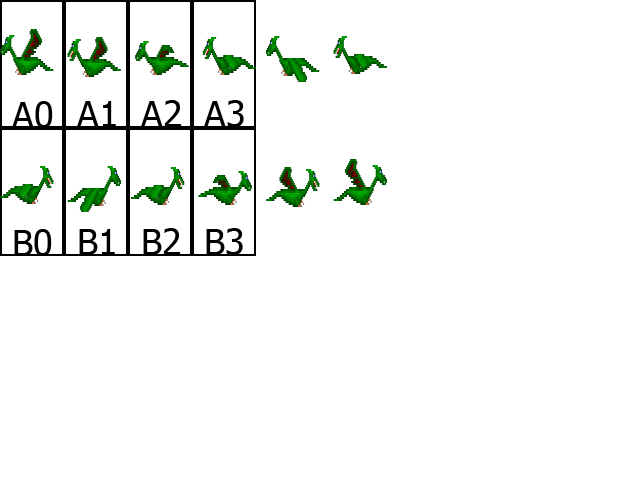
<style>
.page{position:relative;width:640px;height:480px;background:#ffffff}
.page>*{position:absolute;margin:0}
.t1{font:36px "Tahoma";color:#000000}
</style>
<div class="page">
<p class="t1" style="left:12px;top:101px;width:41px;height:27px">A0</p>
<p class="t1" style="left:77px;top:101px;width:39px;height:26px">A1</p>
<p class="t1" style="left:141px;top:100px;width:41px;height:27px">A2</p>
<p class="t1" style="left:204px;top:100px;width:40px;height:27px">A3</p>
<p class="t1" style="left:14px;top:229px;width:38px;height:27px">B0</p>
<p class="t1" style="left:79px;top:229px;width:36px;height:26px">B1</p>
<p class="t1" style="left:143px;top:228px;width:38px;height:27px">B2</p>
<p class="t1" style="left:206px;top:228px;width:37px;height:27px">B3</p>
</div>
